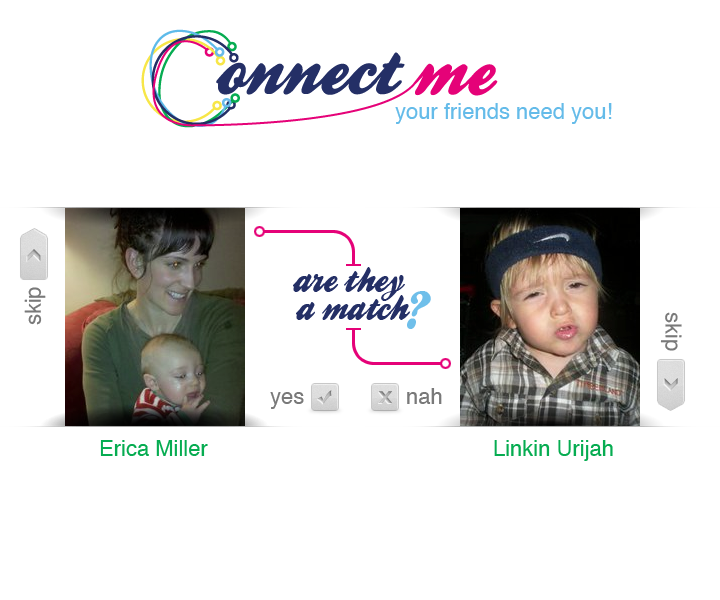
<style>
.page{position:relative;width:720px;height:600px;background:#ffffff}
.page>*{position:absolute;margin:0}
.t1{font:22px "Helvetica";color:#64bbe9}
.t2{font:36px/28px "BallparkWeiner";color:#242f66}
.t3{font:22px "Helvetica";color:#797979}
.t4{font:60px "BallparkWeiner";color:#6fbfea}
.t5{font:22px "Helvetica";color:#06ac51}
</style>
<div class="page">
<p class="t1" style="left:395px;top:103px;width:217px;height:21px">your friends need you!</p>
<p class="t2" style="left:293px;top:267px;width:118px;height:53px;text-align:center">are they<br> a match</p>
<p class="t3" style="left:24px;top:287px;width:22px;height:38px;rotate:-90deg">skip</p>
<p class="t4" style="left:407px;top:291px;width:24px;height:38px">?</p>
<p class="t3" style="left:660px;top:312px;width:22px;height:39px;rotate:90deg">skip</p>
<p class="t3" style="left:407px;top:388px;width:35px;height:16px">nah</p>
<p class="t3" style="left:270px;top:392px;width:34px;height:17px">yes</p>
<p class="t5" style="left:100px;top:440px;width:108px;height:16px">Erica Miller</p>
<p class="t5" style="left:494px;top:440px;width:119px;height:21px">Linkin Urijah</p>
</div>
